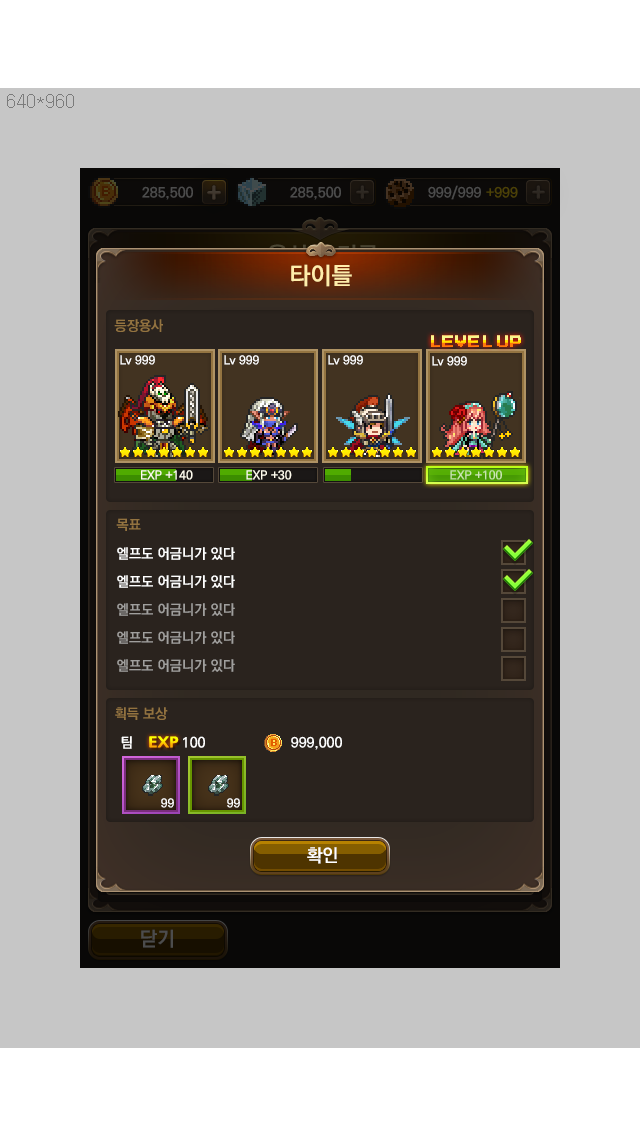
<style>
.page{position:relative;width:640px;height:1136px;background:#c6c6c6}
.page>*{position:absolute;margin:0}
.t1{font:24px "KoPubDotumBold";color:#ffedab}
.t2{font:14px "KoPubDotumBold";color:#937340}
.t3{font:13px "PressStart2P";letter-spacing:0.05em}
.t4{font:13px "PressStart2P";letter-spacing:-0.005em}
.t5{font:12px "KoPubDotumBold";color:#ffffff}
.t6{font:12px "KoPubDotumBold";color:#fffcee}
.t7{font:12px "KoPubDotumBold";color:#cce7b2}
.t8{font:14px/28px "KoPubDotumBold";color:#a09f9d}
.t9{font:14px/28px "KoPubDotumBold";color:#ffffff}
.t10{font:14px "KoPubDotumBold";color:#ffffff}
.t11{font:14px "NanumGothicExtraBold";scale:1.2 1}
.t12{font:18px "KoPubDotumBold";color:#ffffff}
</style>
<div class="page">
<p class="t1" style="left:291px;top:264px;width:61px;height:23px">타이틀</p>
<p class="t2" style="left:114px;top:319px;width:49px;height:13px">등장용사</p>
<p class="t3" style="left:431px;top:335px;width:90px;height:11px">LEVE<span class="t4">L </span>UP</p>
<p class="t3" style="left:431px;top:336px;width:90px;height:11px">LEVE<span class="t4">L </span>UP</p>
<p class="t5" style="left:120px;top:355px;width:35px;height:10px">Lv 999</p>
<p class="t5" style="left:224px;top:355px;width:35px;height:10px">Lv 999</p>
<p class="t5" style="left:328px;top:355px;width:35px;height:10px">Lv 999</p>
<p class="t5" style="left:432px;top:356px;width:35px;height:10px">Lv 999</p>
<p class="t6" style="left:141px;top:470px;width:52px;height:10px">EXP +140</p>
<p class="t6" style="left:246px;top:470px;width:46px;height:10px">EXP +30</p>
<p class="t7" style="left:450px;top:470px;width:52px;height:10px">EXP +100</p>
<p class="t2" style="left:116px;top:518px;width:25px;height:13px">목표</p>
<p class="t8" style="left:117px;top:547px;width:118px;height:125px"><span class="t9">엘프도 어금니가 있다 <br>엘프도 어금니가 있다<br></span>엘프도 어금니가 있다<br>엘프도 어금니가 있다<br>엘프도 어금니가 있다</p>
<p class="t2" style="left:115px;top:707px;width:53px;height:13px">획득 보상</p>
<p class="t10" style="left:121px;top:736px;width:84px;height:13px">팀            100</p>
<p class="t11" style="left:149px;top:736px;width:30px;height:12px">EXP</p>
<p class="t10" style="left:291px;top:736px;width:51px;height:14px">999,000</p>
<p class="t5" style="left:161px;top:798px;width:13px;height:10px">99</p>
<p class="t5" style="left:227px;top:798px;width:13px;height:10px">99</p>
<p class="t12" style="left:307px;top:847px;width:30px;height:17px">확인</p>
</div>
